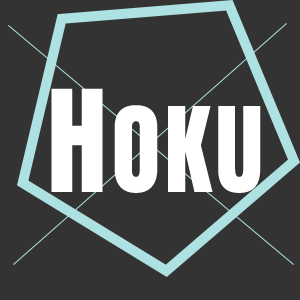
<style>
.page{position:relative;width:300px;height:300px;background:#333333}
.page>*{position:absolute;margin:0}
.t1{font:100px "Anton-Regular";letter-spacing:0.04em;color:#ffffff;text-transform:uppercase}
.t2{font:120px "Anton-Regular";letter-spacing:0.04em;color:#ffffff;text-transform:uppercase}
</style>
<div class="page">
<p class="t1" style="left:51px;top:88px;width:210px;height:105px"><span class="t2">H</span>Oku</p>
</div>
